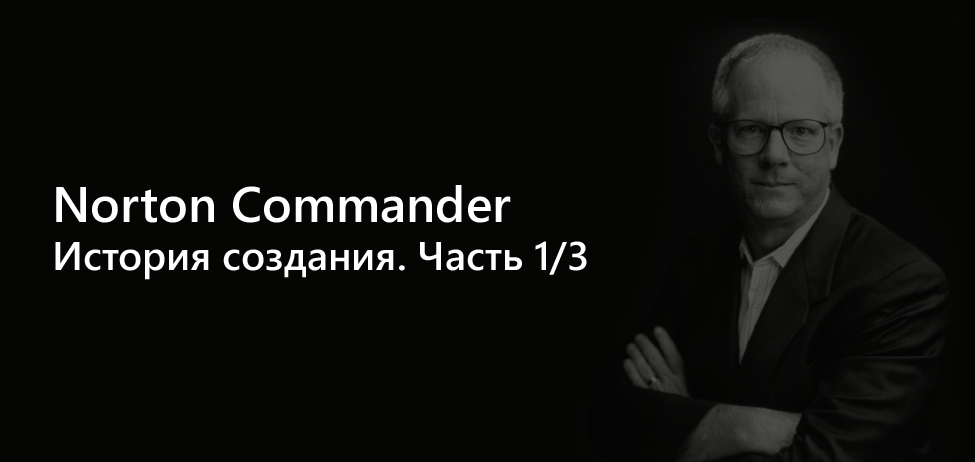
<style>
.page{position:relative;width:975px;height:462px;background:#050504}
.page>*{position:absolute;margin:0}
.t1{font:40px "SegoeUI-SemiBold";color:#ffffff}
.t2{font:50px "SegoeUI-SemiBold";color:#ffffff}
</style>
<div class="page">
<p class="t1" style="left:55px;top:185px;width:532px;height:95px"><span class="t2">Norton Commander<br></span>История создания. Часть 1/3</p>
</div>
